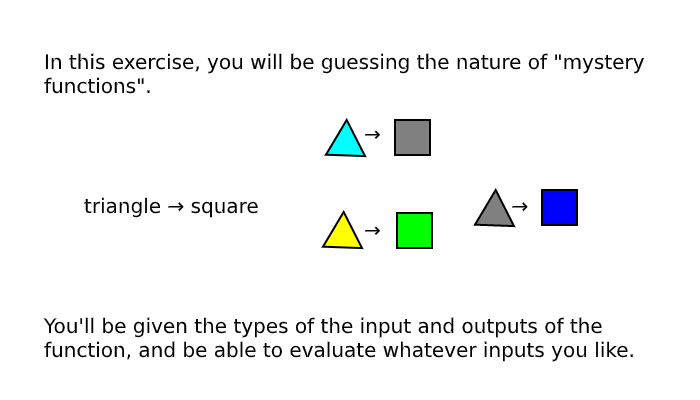
<style>
.page{position:relative;width:700px;height:400px;background:#ffffff}
.page>*{position:absolute;margin:0}
.t1{font:20px "DejaVuSans";color:#000000}
</style>
<div class="page">
<p class="t1" style="left:43px;top:53px;width:601px;height:309px">In this exercise, you will be guessing the nature of "mystery<br>functions".<br>        <br>        →<br><br> <br> triangle → square        →<br>        →<br><br><br><br>You'll be given the types of the input and outputs of the<br>function, and be able to evaluate whatever inputs you like.</p>
</div>
